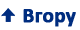
<style>
.page{position:relative;width:80px;height:30px;background:#ffffff}
.page>*{position:absolute;margin:0}
.t1{font:20.8px "Calibri-Bold";color:#002d7f;font-weight:bold}
</style>
<div class="page">
<p class="t1" style="left:23px;top:9px;width:53px;height:18px">Вгору</p>
</div>
